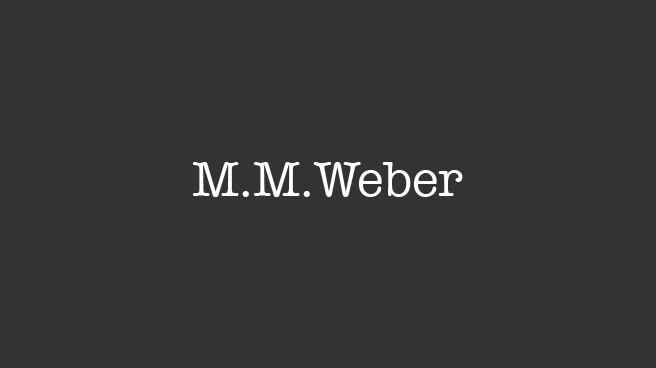
<style>
.page{position:relative;width:656px;height:368px;background:#333333}
.page>*{position:absolute;margin:0}
.t1{font:50px "AmericanTypewriter";color:#ffffff}
</style>
<div class="page">
<p class="t1" style="left:192px;top:162px;width:271px;height:35px">M.M.Weber</p>
</div>
